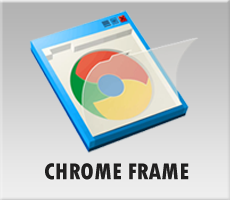
<style>
.page{position:relative;width:230px;height:200px}
.page>*{position:absolute;margin:0}
.t1{font:24px "TwCenMT-CondensedExtraBold";color:#232222}
</style>
<div class="page">
<p class="t1" style="left:45px;top:163px;width:144px;height:17px">CHROME FRAME</p>
</div>
